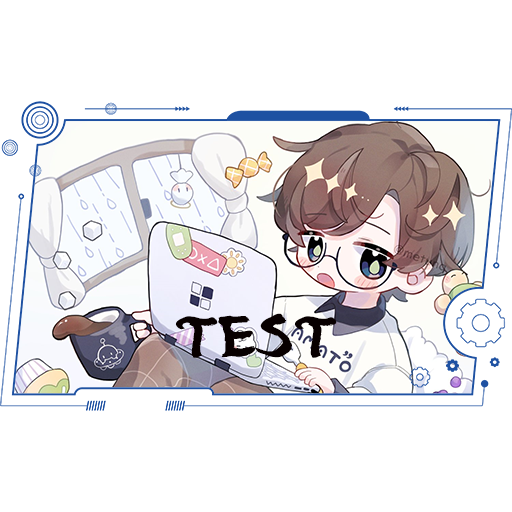
<style>
.page{position:relative;width:512px;height:512px;background:#ffffff}
.page>*{position:absolute;margin:0}
.t1{font:72px "YDIYuroB";color:#080000;scale:1.1 1}
</style>
<div class="page">
<p class="t1" style="left:175px;top:313px;width:162px;height:45px">TEST</p>
</div>
